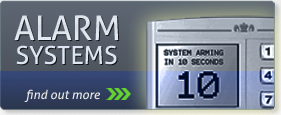
<style>
.page{position:relative;width:281px;height:115px}
.page>*{position:absolute;margin:0}
.t1{font:34.1px "Aller";color:#e0e7ee}
.t2{font:25.1px "Aller";color:#e0e7ee}
.t3{font:12.6px "Aller-Italic";color:#eaeae8}
</style>
<div class="page">
<p class="t1" style="left:14px;top:15px;width:105px;height:26px">ALARM</p>
<p class="t2" style="left:16px;top:45px;width:101px;height:20px">SYSTEMS</p>
<p class="t3" style="left:24px;top:89px;width:76px;height:13px">find out more</p>
</div>
